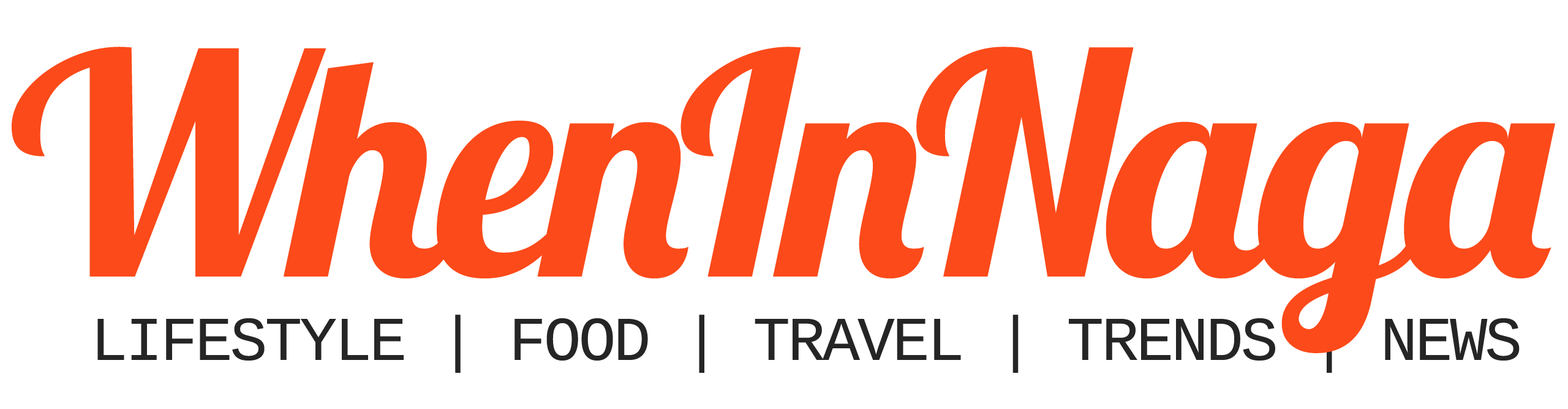
<style>
.page{position:relative;width:1568px;height:409px;background:#ffffff}
.page>*{position:absolute;margin:0}
.t1{font:305.8px "Lobster1.4";letter-spacing:-0.03em;color:#fc4a1a}
.t2{font:62.1px "LiberationMono-Regular";letter-spacing:-0.04em;color:#252525}
</style>
<div class="page">
<p class="t1" style="left:12px;top:47px;width:1543px;height:306px">WhenInNaga</p>
<p class="t2" style="left:97px;top:314px;width:1423px;height:58px">LIFESTYLE | FOOD | TRAVEL | TRENDS | NEWS</p>
</div>
